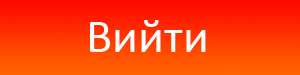
<style>
.page{position:relative;width:300px;height:75px}
.page>*{position:absolute;margin:0}
.t1{font:48px "Calibri";color:#ffffff}
</style>
<div class="page">
<p class="t1" style="left:90px;top:20px;width:116px;height:32px">Вийти</p>
</div>
